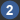
<style>
.page{position:relative;width:20px;height:20px;background:#3b5f97}
.page>*{position:absolute;margin:0}
.t1{font:14px "Arial-BoldMT";letter-spacing:0.025em;color:#fcfdfd}
</style>
<div class="page">
<p class="t1" style="left:6px;top:5px;width:7px;height:10px">2</p>
</div>
